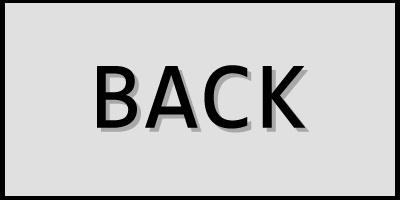
<style>
.page{position:relative;width:400px;height:200px;background:#e0e0e0}
.page>*{position:absolute;margin:0}
.t1{font:96px "Consolas";color:#000000;font-weight:bold}
.t2{font:96px "Consolas";font-weight:bold}
</style>
<div class="page">
<p class="t1" style="left:97px;top:65px;width:208px;height:64px">BACK</p>
<p class="t2" style="left:101px;top:69px;width:208px;height:64px">BACK</p>
</div>
